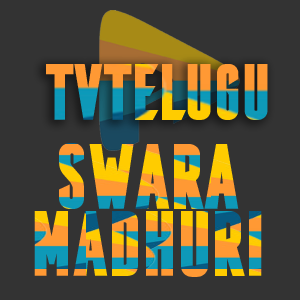
<style>
.page{position:relative;width:300px;height:300px;background:#333333}
.page>*{position:absolute;margin:0}
.t1{font:83.3px "BrandbeExtraBold";text-transform:uppercase}
.t2{font:97.2px/66.7px "BrandbeExtraBold";text-transform:uppercase}
</style>
<div class="page">
<p class="t1" style="left:46px;top:64px;width:222px;height:56px">TVTELUGU</p>
<p class="t2" style="left:34px;top:143px;width:228px;height:134px;text-align:center">Swara<br>Madhuri</p>
</div>
